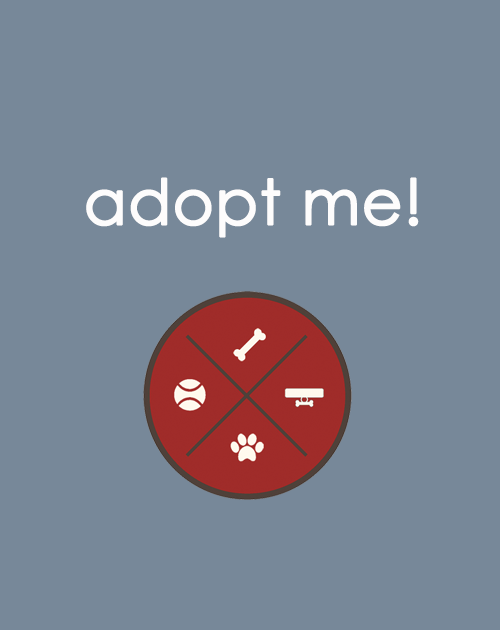
<style>
.page{position:relative;width:500px;height:630px;background:#778899}
.page>*{position:absolute;margin:0}
.t1{font:62.5px "CenturyGothic";color:#fdfcfc;font-weight:bold}
</style>
<div class="page">
<p class="t1" style="left:86px;top:177px;width:333px;height:61px">adopt me!</p>
</div>
